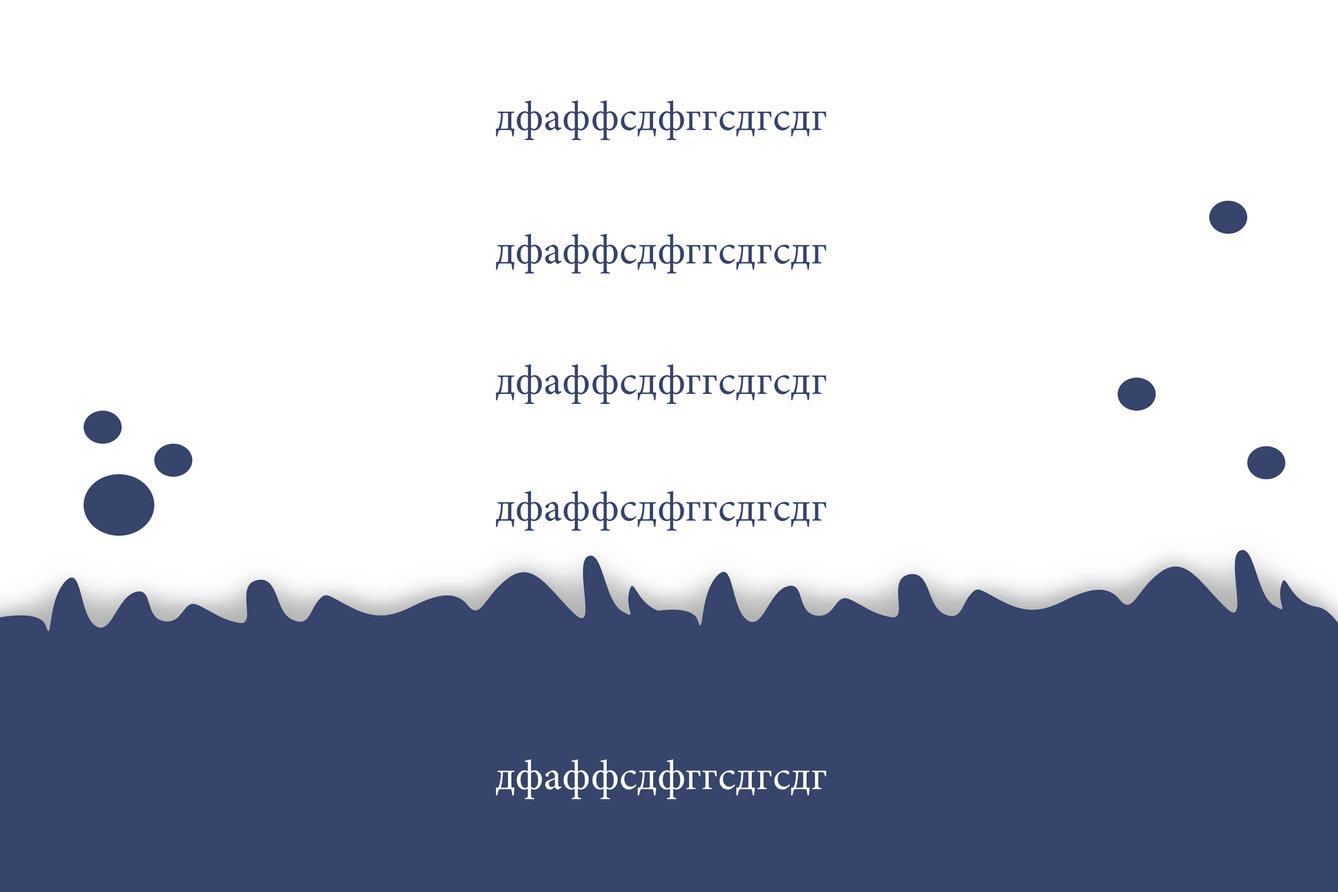
<style>
.page{position:relative;width:1338px;height:892px;background:#ffffff}
.page>*{position:absolute;margin:0}
.t1{font:41.8px "MinionPro-Regular";color:#37446b}
.t2{font:41.8px "MinionPro-Regular";color:#ffffff}
</style>
<div class="page">
<p class="t1" style="left:496px;top:100px;width:330px;height:40px">дфаффсдфггсдгсдг</p>
<p class="t1" style="left:496px;top:234px;width:330px;height:39px">дфаффсдфггсдгсдг</p>
<p class="t1" style="left:496px;top:364px;width:330px;height:40px">дфаффсдфггсдгсдг</p>
<p class="t1" style="left:496px;top:491px;width:330px;height:39px">дфаффсдфггсдгсдг</p>
<p class="t2" style="left:496px;top:759px;width:330px;height:40px">дфаффсдфггсдгсдг</p>
</div>
